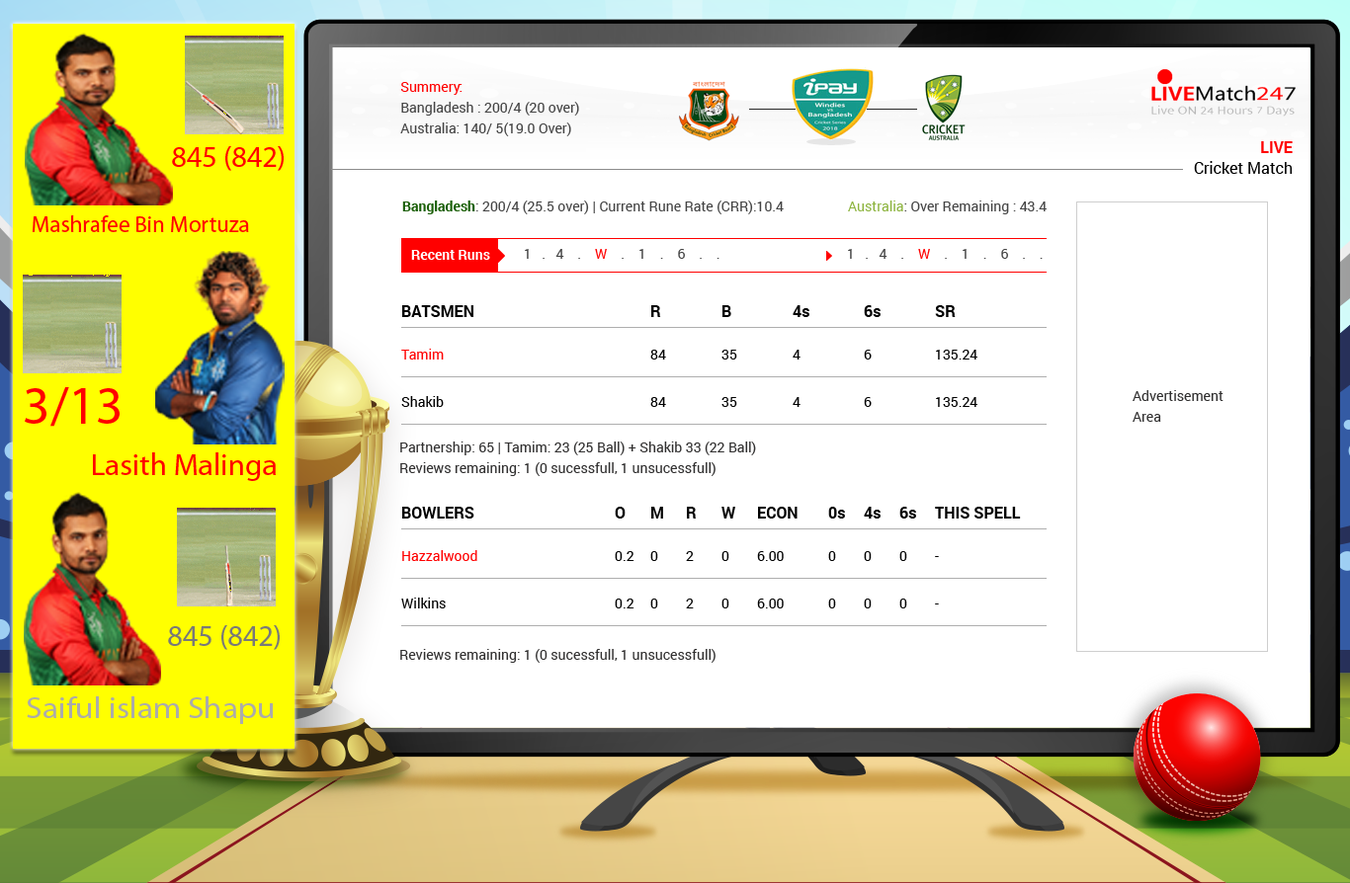
<style>
.page{position:relative;width:1350px;height:883px;background:#ffffff}
.page>*{position:absolute;margin:0}
.t1{font:13.8px/20.8px "Roboto-Regular";color:#444444}
.t2{font:13.8px/20.8px "Roboto-Regular";color:#ff0000}
.t3{font:29.6px "MyriadPro-Regular";color:#ff0000}
.t4{font:15.8px/20.8px "Roboto-Regular";color:#000000}
.t5{font:15.8px/20.8px "Roboto-Bold";color:#ff0000;text-transform:uppercase}
.t6{font:13.8px "Roboto-Regular";color:#444444}
.t7{font:13.8px "Roboto-Bold";color:#1a5f07}
.t8{font:13.8px "Roboto-Regular";color:#8db43f}
.t9{font:22.8px "MyriadPro-Regular";color:#ff0303}
.t10{font:13.8px "Roboto-Bold";color:#fffefe}
.t11{font:13.8px "Roboto-Regular";color:#ff0000}
.t12{font:15.8px "Roboto-Bold";color:#010101}
.t13{font:15.8px "Roboto-Bold";color:#010101;text-transform:uppercase}
.t14{font:13.8px "Roboto-Regular";color:#010101}
.t15{font:53.4px "MyriadPro-Regular";color:#ff0000}
.t16{font:13.8px/20.8px "Roboto-Regular";color:#313030}
.t17{font:30.9px "MyriadPro-Regular";color:#ff0000}
.t18{font:29.6px "MyriadPro-Regular";color:#797979}
.t19{font:13.8px "Roboto-Regular";color:#313030}
.t20{font:30px "MyriadPro-Regular";color:#ababab;scale:1.1 1}
</style>
<div class="page">
<p class="t1" style="left:400px;top:82px;width:179px;height:54px"><span class="t2">Summery:</span><br>Bangladesh : 200/4 (20 over)<br>Australia: 140/ 5(19.0 Over)</p>
<p class="t3" style="left:172px;top:146px;width:112px;height:25px">845 (842)</p>
<p class="t4" style="left:1194px;top:141px;width:99px;height:33px;text-align:right"><span class="t5">Live<br></span>Cricket Match</p>
<p class="t6" style="left:402px;top:201px;width:382px;height:13px"><span class="t7">Bangladesh</span>: 200/4 (25.5 over) | Current Rune Rate (CRR):10.4</p>
<p class="t6" style="left:848px;top:201px;width:198px;height:13px"><span class="t8">Australia</span>: Over Remaining : 43.4</p>
<p class="t9" style="left:32px;top:215px;width:217px;height:17px">Mashrafee Bin Mortuza</p>
<p class="t10" style="left:411px;top:250px;width:79px;height:10px">Recent Runs</p>
<p class="t6" style="left:525px;top:249px;width:194px;height:10px">1   .   4    .    <span class="t11">W</span>    .    1    .    6    .    .</p>
<p class="t6" style="left:848px;top:249px;width:194px;height:10px">1   .   4    .    <span class="t11">W</span>    .    1    .    6    .    .</p>
<p class="t12" style="left:402px;top:305px;width:554px;height:12px"><span class="t13">Batsmen</span>     R  B  4s  6s  SR</p>
<p class="t14" style="left:401px;top:349px;width:576px;height:11px"><span class="t11">Tamim</span>        84  35  4  6  135.24</p>
<p class="t15" style="left:25px;top:387px;width:95px;height:40px">3/13</p>
<p class="t14" style="left:401px;top:396px;width:576px;height:11px">Shakib       84  35  4  6  135.24</p>
<p class="t16" style="left:1132px;top:390px;width:91px;height:32px">Advertisement<br>Area</p>
<p class="t16" style="left:400px;top:442px;width:356px;height:34px">Partnership: 65 | Tamim: 23 (25 Ball) + Shakib 33 (22 Ball)<br>Reviews remaining: 1 (0 sucessfull, 1 unsucessfull)</p>
<p class="t17" style="left:93px;top:453px;width:183px;height:28px">Lasith Malinga</p>
<p class="t12" style="left:402px;top:507px;width:619px;height:12px">BOWLERS    O M R W ECON 0s 4s 6s THIS SPELL</p>
<p class="t14" style="left:402px;top:550px;width:537px;height:11px"><span class="t11">Hazzalwood</span>      0.2 0 2 0 6.00  0 0 0 -</p>
<p class="t14" style="left:401px;top:598px;width:538px;height:11px">Wilkins       0.2 0 2 0 6.00  0 0 0 -</p>
<p class="t18" style="left:168px;top:625px;width:112px;height:25px">845 (842)</p>
<p class="t19" style="left:400px;top:649px;width:315px;height:14px">Reviews remaining: 1 (0 sucessfull, 1 unsucessfull)</p>
<p class="t20" style="left:27px;top:697px;width:246px;height:27px">Saiful islam Shapu</p>
</div>
